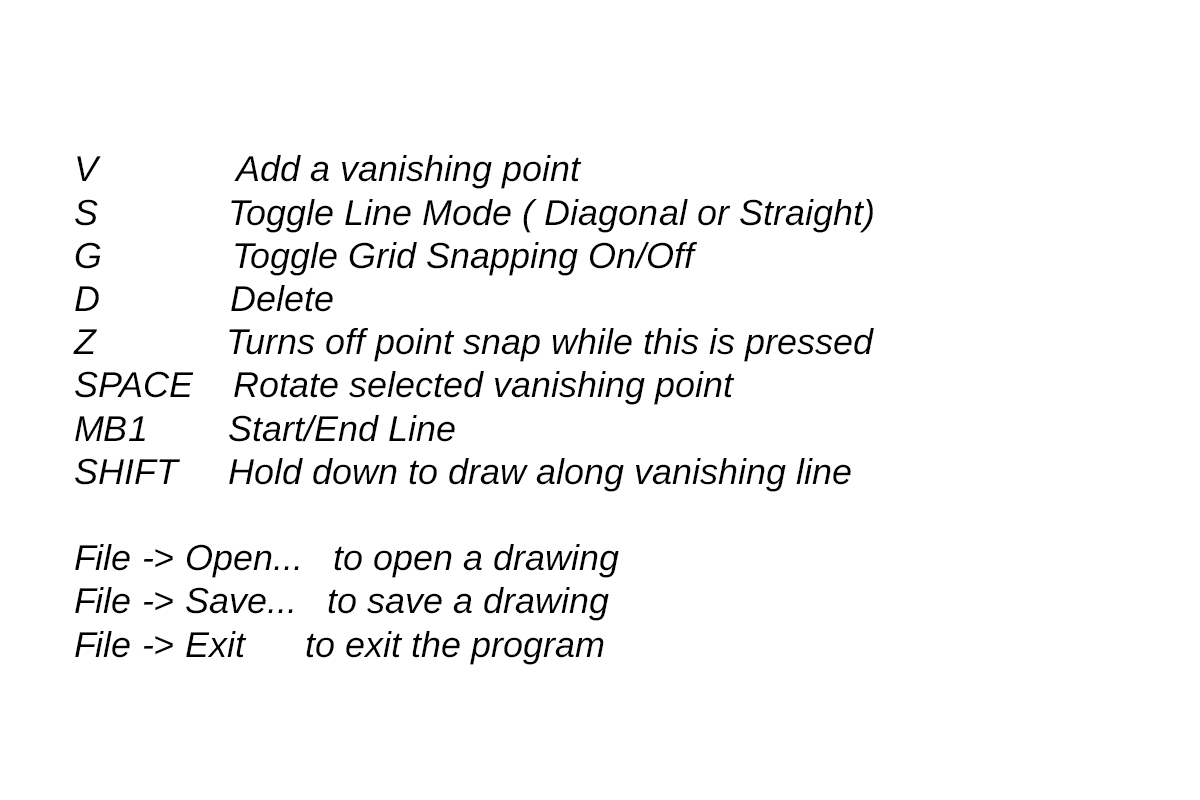
<style>
.page{position:relative;width:1200px;height:800px;background:#ffffff}
.page>*{position:absolute;margin:0}
.t1{font:36px "Arimo-Italic";color:#000000}
</style>
<div class="page">
<p class="t1" style="left:73px;top:155px;width:801px;height:510px">V              Add a vanishing point<br>S             Toggle Line Mode ( Diagonal or Straight)<br>G             Toggle Grid Snapping On/Off<br>D             Delete<br>Z             Turns off point snap while this is pressed<br>SPACE    Rotate selected vanishing point<br>MB1        Start/End Line<br>SHIFT     Hold down to draw along vanishing line<br><br>File -&gt; Open...   to open a drawing<br>File -&gt; Save...   to save a drawing<br>File -&gt; Exit      to exit the program</p>
</div>
